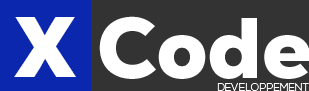
<style>
.page{position:relative;width:309px;height:91px;background:#333333}
.page>*{position:absolute;margin:0}
.t1{font:85.3px "Nexa-Trial-Black";letter-spacing:-0.005em;color:#ffffff}
.t2{font:10.7px "NexaLight";letter-spacing:-0.005em;color:#ffffff}
</style>
<div class="page">
<p class="t1" style="left:14px;top:17px;width:62px;height:60px">X</p>
<p class="t1" style="left:99px;top:16px;width:211px;height:63px">Code</p>
<p class="t2" style="left:217px;top:83px;width:92px;height:8px">DEVELOPPEMENT</p>
</div>
